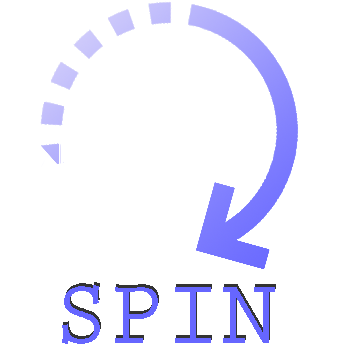
<style>
.page{position:relative;width:345px;height:345px;background:#ffffff}
.page>*{position:absolute;margin:0}
.t1{font:93.1px "PrestigeEliteStd-Bd";color:#6666ff}
.t2{font:93.1px "PrestigeEliteStd-Bd"}
</style>
<div class="page">
<p class="t1" style="left:62px;top:285px;width:213px;height:59px">SPIN</p>
<p class="t2" style="left:63px;top:282px;width:213px;height:59px">SPIN</p>
</div>
